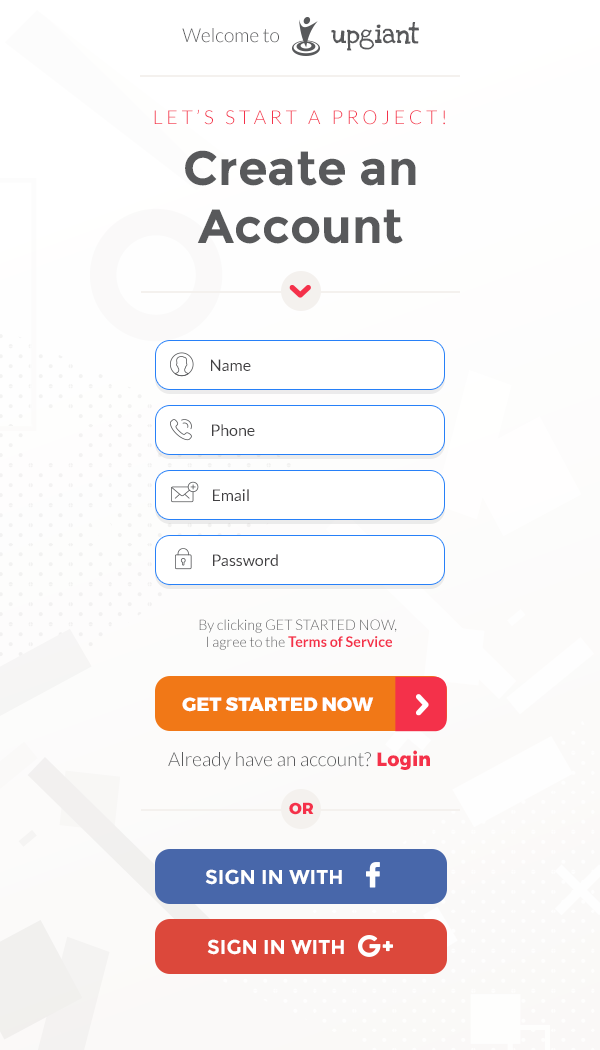
<style>
.page{position:relative;width:600px;height:1050px;background:#ffffff}
.page>*{position:absolute;margin:0}
.t1{font:19.2px "Lato-Light";color:#58595b}
.t2{font:19.2px "LoveYaLikeASisterSolid";color:#58595b}
.t3{font:19.2px "Lato-Light";color:#f4314a;text-transform:uppercase}
.t4{font:48px "Montserrat-Bold";color:#58595b}
.t5{font:16px "Lato-Regular";color:#414042}
.t6{font:14.4px "Lato-Light";color:#58595b}
.t7{font:14.4px "Lato-Bold";color:#f4314a}
.t8{font:19.2px "Montserrat-ExtraBold";color:#ffffff}
.t9{font:19.2px "Montserrat-ExtraBold";color:#f4314a}
.t10{font:16px "Montserrat-ExtraBold";color:#f4314a}
.t11{font:20px "Montserrat-Bold";color:#ffffff}
</style>
<div class="page">
<p class="t1" style="left:182px;top:28px;width:97px;height:15px">Welcome to</p>
<p class="t2" style="left:331px;top:22px;width:88px;height:29px">upgiant</p>
<p class="t3" style="left:154px;top:109px;width:291px;height:16px">L e t ’ s   S t a r t   a   P r o j e c t !</p>
<p class="t4" style="left:185px;top:150px;width:231px;height:94px;text-align:center">Create an<br>Account</p>
<p class="t5" style="left:211px;top:359px;width:40px;height:12px">Name</p>
<p class="t5" style="left:212px;top:424px;width:43px;height:12px">Phone</p>
<p class="t5" style="left:213px;top:489px;width:36px;height:12px">Email</p>
<p class="t5" style="left:213px;top:554px;width:65px;height:12px">Password</p>
<p class="t6" style="left:199px;top:619px;width:198px;height:31px;text-align:center">By clicking GET STARTED NOW, <br>I agree to the <span class="t7">Terms of Service</span></p>
<p class="t8" style="left:182px;top:697px;width:192px;height:15px">GET STARTED NOW</p>
<p class="t1" style="left:168px;top:750px;width:262px;height:20px">Already have an account? <span class="t9">Login</span></p>
<p class="t10" style="left:289px;top:802px;width:25px;height:13px">OR</p>
<p class="t11" style="left:205px;top:869px;width:137px;height:16px">SIGN IN WITH</p>
<p class="t11" style="left:207px;top:939px;width:137px;height:16px">SIGN IN WITH</p>
</div>
